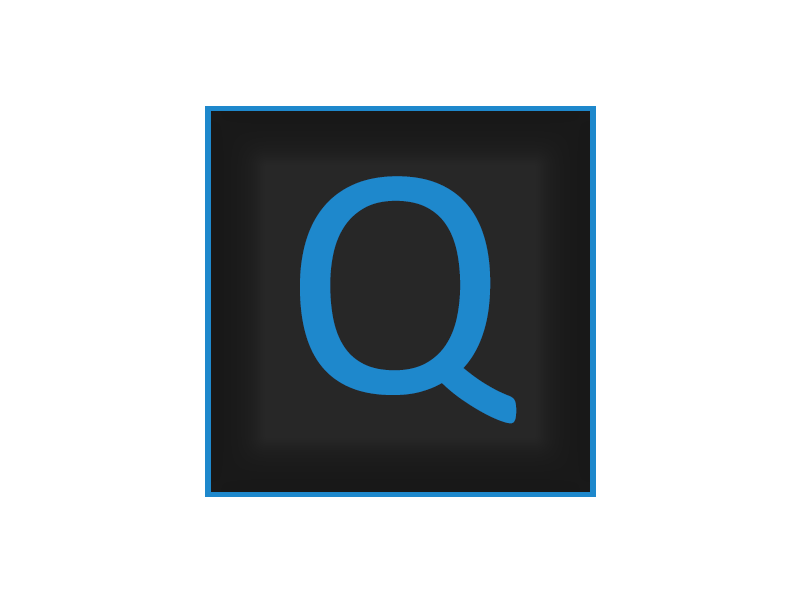
<style>
.page{position:relative;width:800px;height:600px;background:#ffffff}
.page>*{position:absolute;margin:0}
.t1{font:336.3px "Calibri";color:#1e88cc}
</style>
<div class="page">
<p class="t1" style="left:300px;top:176px;width:217px;height:248px">Q</p>
</div>
